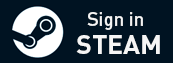
<style>
.page{position:relative;width:173px;height:63px;background:#001322}
.page>*{position:absolute;margin:0}
.t1{font:18.7px "DINPro-Medium";color:#f5f5f5}
.t2{font:26.7px "DINPro-Bold";color:#f5f5f5}
</style>
<div class="page">
<p class="t1" style="left:87px;top:12px;width:56px;height:18px">Sign in</p>
<p class="t2" style="left:76px;top:35px;width:84px;height:19px">STEAM</p>
</div>
